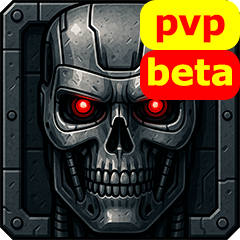
<style>
.page{position:relative;width:240px;height:240px}
.page>*{position:absolute;margin:0}
.t1{font:36px "VerdanaPro-Bold";color:#ff0000}
.t2{font:36px "VerdanaPro-Bold";color:#ffff00}
</style>
<div class="page">
<p class="t1" style="left:156px;top:14px;width:69px;height:29px">pvp</p>
<p class="t2" style="left:148px;top:57px;width:84px;height:29px">beta</p>
</div>
